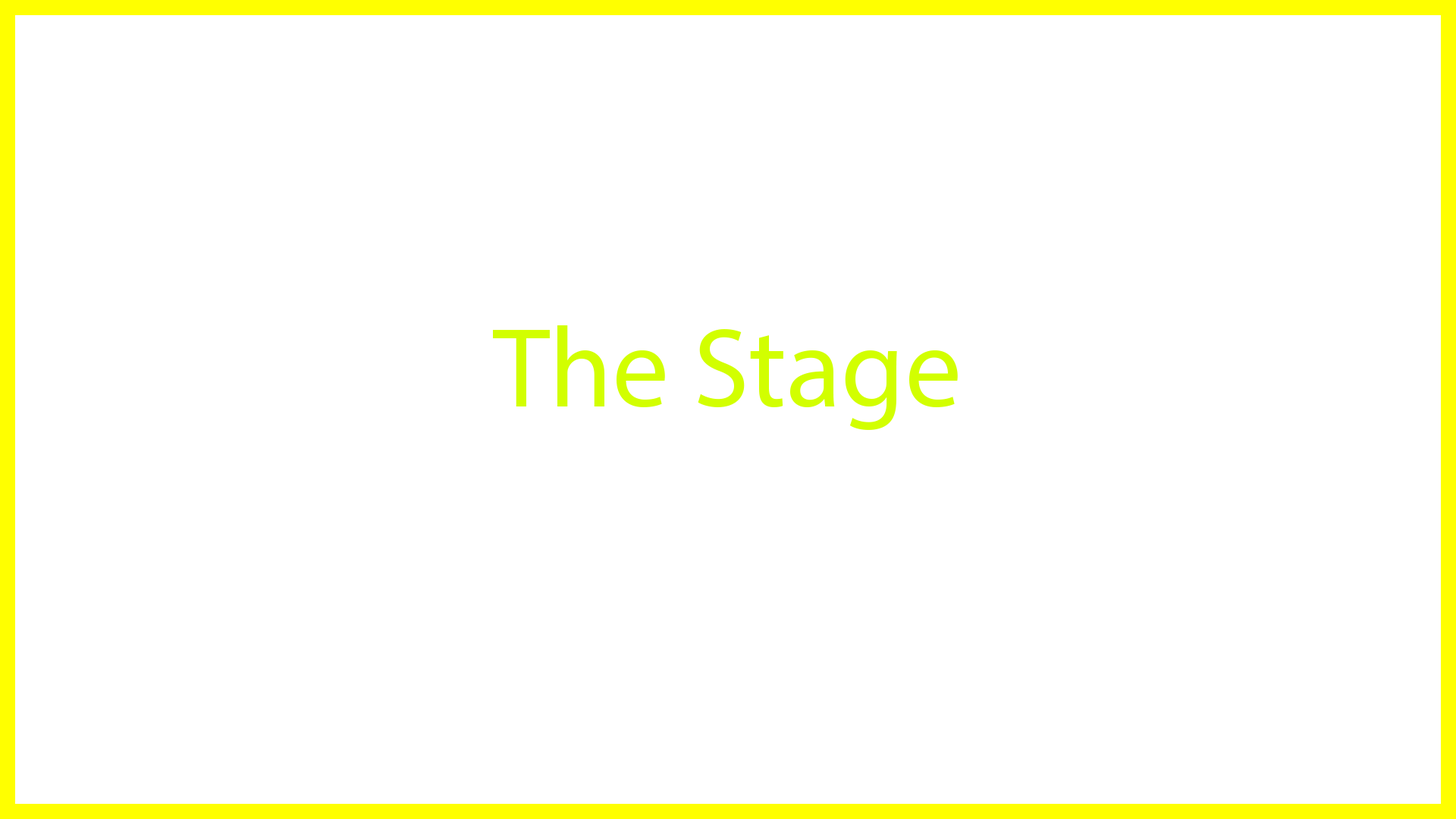
<style>
.page{position:relative;width:1456px;height:819px;background:#ffffff}
.page>*{position:absolute;margin:0}
.t1{font:113.7px "MyriadPro-Regular";color:#d2ff00}
</style>
<div class="page">
<p class="t1" style="left:493px;top:325px;width:465px;height:105px">The Stage</p>
</div>
